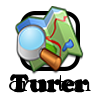
<style>
.page{position:relative;width:100px;height:100px;background:#ffffff}
.page>*{position:absolute;margin:0}
.t1{font:29.2px "PoorRichard-Regular";color:#000000}
.t2{font:25px "CooperBlackStd";color:#000000}
</style>
<div class="page">
<p class="t1" style="left:9px;top:75px;width:82px;height:16px">crouton</p>
<p class="t2" style="left:10px;top:74px;width:79px;height:19px">Turer</p>
</div>
